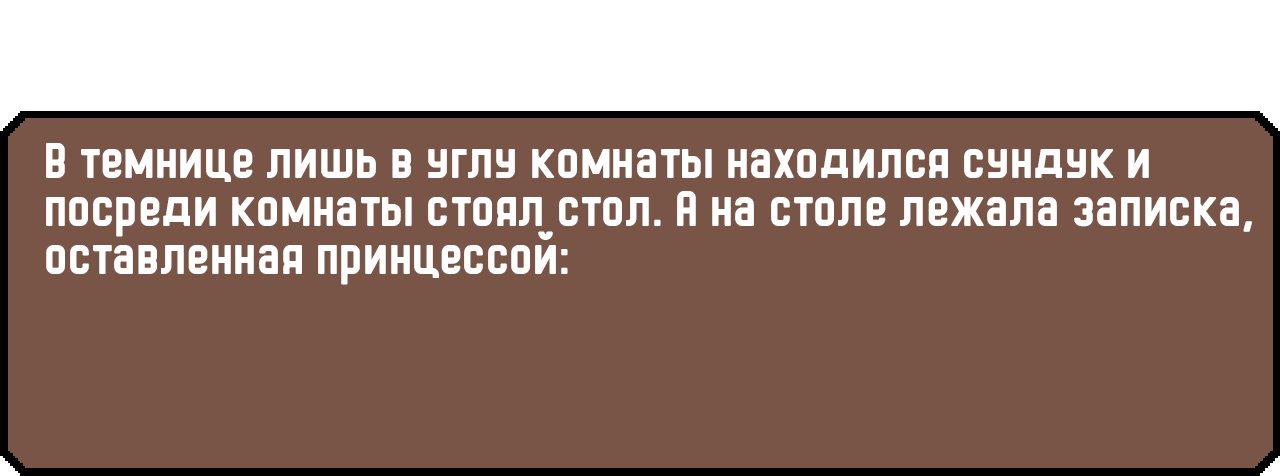
<style>
.page{position:relative;width:1280px;height:476px;background:#795548}
.page>*{position:absolute;margin:0}
.t1{font:48px/48px "HermanoMayor";color:#ffffff}
</style>
<div class="page">
<p class="t1" style="left:46px;top:143px;width:1206px;height:142px">В темнице лишь в углу комнаты находился сундук и посреди комнаты стоял стол. А на столе лежала записка, оставленная принцессой:</p>
</div>
